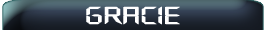
<style>
.page{position:relative;width:265px;height:30px}
.page>*{position:absolute;margin:0}
.t1{font:23.9px "DigifaceWide";color:#ffffff;font-weight:bold}
</style>
<div class="page">
<p class="t1" style="left:86px;top:6px;width:94px;height:19px">Gracie</p>
</div>
